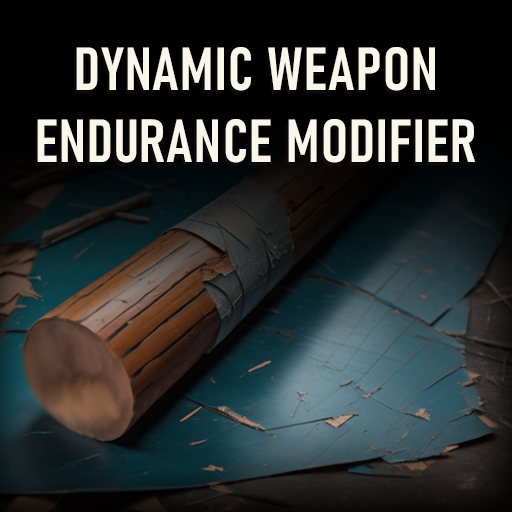
<style>
.page{position:relative;width:512px;height:512px}
.page>*{position:absolute;margin:0}
.t1{font:60px "Bahnschrift-SemiBoldCondensed";letter-spacing:0.025em;color:#faf6ea;font-weight:bold}
</style>
<div class="page">
<p class="t1" style="left:37px;top:47px;width:438px;height:116px;text-align:center">DYNAMIC WEAPON ENDURANCE MODIFIER</p>
</div>
